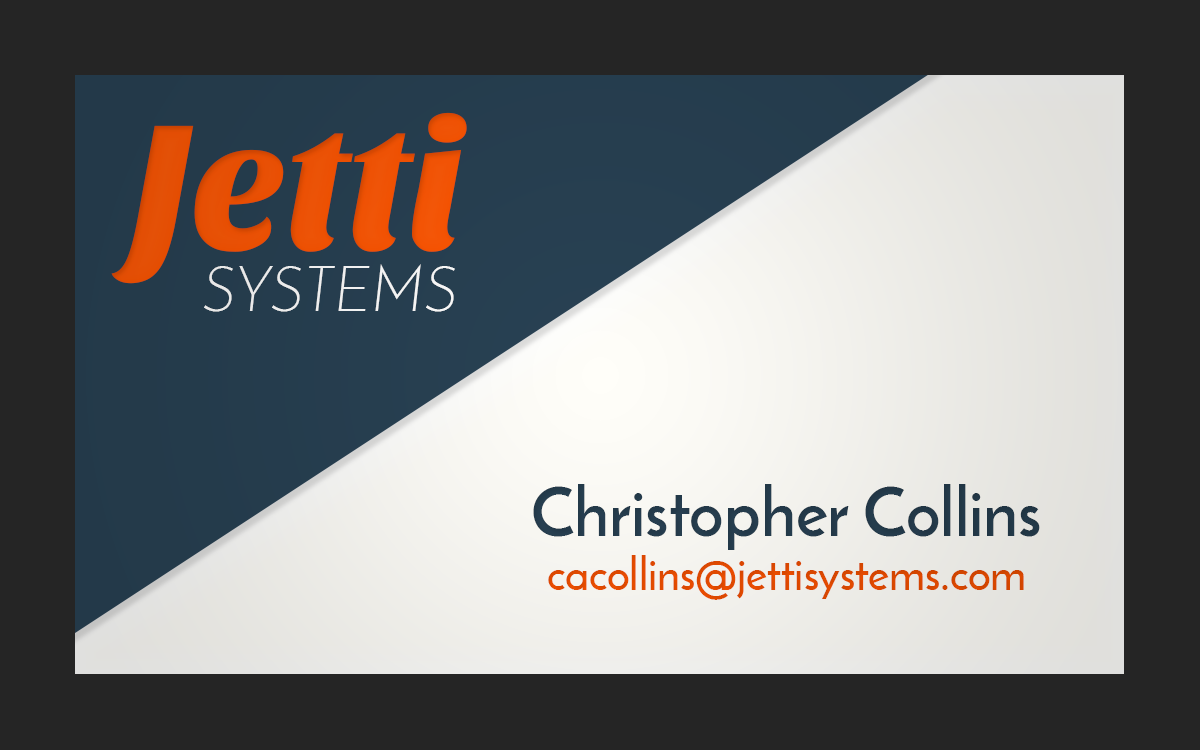
<style>
.page{position:relative;width:1200px;height:750px;background:#252525}
.page>*{position:absolute;margin:0}
.t1{font:185.5px "SansitaOne";letter-spacing:-0.01em;color:#e85004;scale:0.95 1}
.t2{font:62.6px "JosefinSans-LightItalic";letter-spacing:0.01em;color:#ffffff;text-transform:uppercase;scale:0.95 1}
.t3{font:44.7px "JosefinSans-SemiBold";color:#ff5400}
.t4{font:67.1px "JosefinSans-Bold";color:#284153}
</style>
<div class="page">
<p class="t1" style="left:111px;top:112px;width:356px;height:172px">Jetti</p>
<p class="t2" style="left:204px;top:264px;width:251px;height:48px">systems</p>
<p class="t3" style="left:533px;top:484px;width:507px;height:116px;text-align:center"><span class="t4">Christopher Collins<br></span>cacollins@jettisystems.com</p>
</div>
